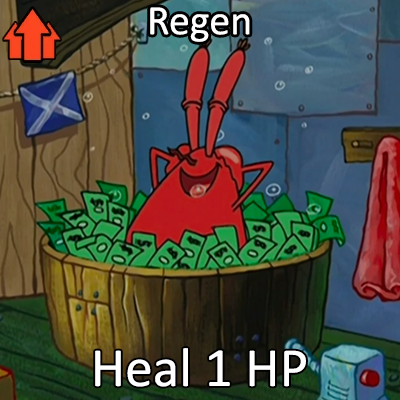
<style>
.page{position:relative;width:400px;height:400px}
.page>*{position:absolute;margin:0}
.t1{font:72px "Calibri";color:#ffffff}
.t2{font:95px "Calibri";color:#ffffff}
</style>
<div class="page">
<p class="t1" style="left:150px;top:7px;width:100px;height:35px">Regen</p>
<p class="t2" style="left:95px;top:348px;width:211px;height:39px">Heal 1 HP</p>
</div>
